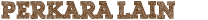
<style>
.page{position:relative;width:208px;height:20px;background:#ffffff}
.page>*{position:absolute;margin:0}
.t1{font:24px "ScribbleBoxDEMO";color:#684121}
</style>
<div class="page">
<p class="t1" style="left:1px;top:1px;width:175px;height:19px">Perkara lain</p>
</div>
